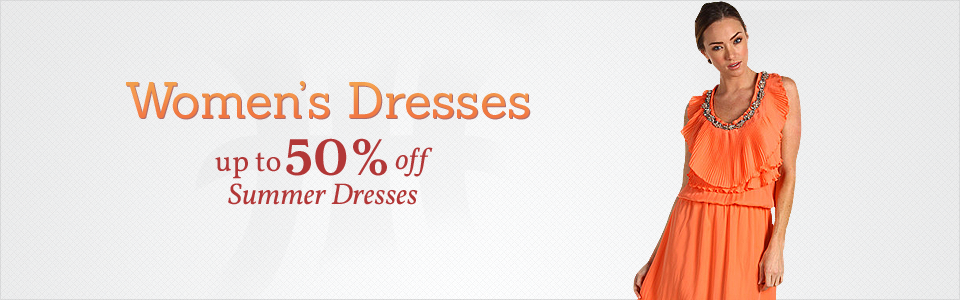
<style>
.page{position:relative;width:960px;height:300px}
.page>*{position:absolute;margin:0}
.t1{font:50px "Sanchez-Regular";color:#f28545}
.t2{font:50px "Serif12Beta-Bold";color:#b23737}
.t3{font:30px "Vollkorn-Italic";color:#b23737}
.t4{font:30px "Vollkorn-Regular";color:#b23737}
</style>
<div class="page">
<p class="t1" style="left:126px;top:81px;width:404px;height:38px">Women’s Dresses</p>
<p class="t2" style="left:286px;top:138px;width:101px;height:38px">50%</p>
<p class="t3" style="left:395px;top:147px;width:38px;height:30px">off</p>
<p class="t4" style="left:215px;top:152px;width:66px;height:27px">up to</p>
<p class="t3" style="left:228px;top:183px;width:190px;height:22px">Summer Dresses</p>
</div>
